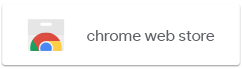
<style>
.page{position:relative;width:242px;height:69px;background:#ffffff}
.page>*{position:absolute;margin:0}
.t1{font:16.3px "ProductSans-Regular";color:#5f6368}
</style>
<div class="page">
<p class="t1" style="left:87px;top:30px;width:128px;height:11px">chrome web store</p>
</div>
